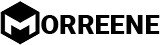
<style>
.page{position:relative;width:160px;height:45px;background:#ffffff}
.page>*{position:absolute;margin:0}
.t1{font:27px "Roboto-Black";letter-spacing:0.01em;color:#000000}
.t2{font:27px "Roboto-Black";color:#000000}
</style>
<div class="page">
<p class="t1" style="left:41px;top:15px;width:119px;height:19px"><span class="t2">ORR</span>EENE</p>
</div>
